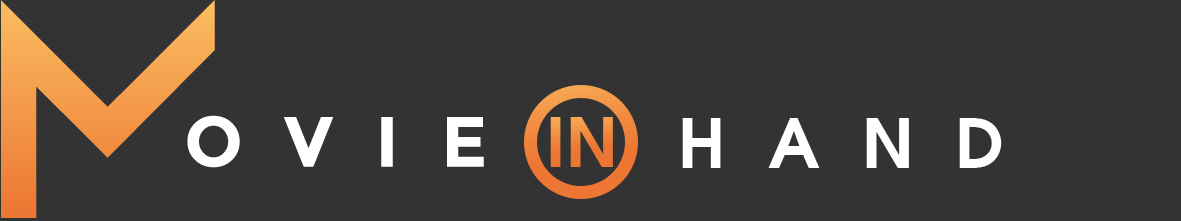
<style>
.page{position:relative;width:1181px;height:221px;background:#333333}
.page>*{position:absolute;margin:0}
.t1{font:66.7px "VNI-Avo-Bold";color:#f29144;scale:1.05 1}
.t2{font:66.7px "VNI-Avo-Bold";letter-spacing:0.6em;color:#ffffff;scale:1.05 1}
</style>
<div class="page">
<p class="t1" style="left:550px;top:117px;width:63px;height:50px">IN</p>
<p class="t2" style="left:682px;top:118px;width:320px;height:50px">HAND</p>
</div>
